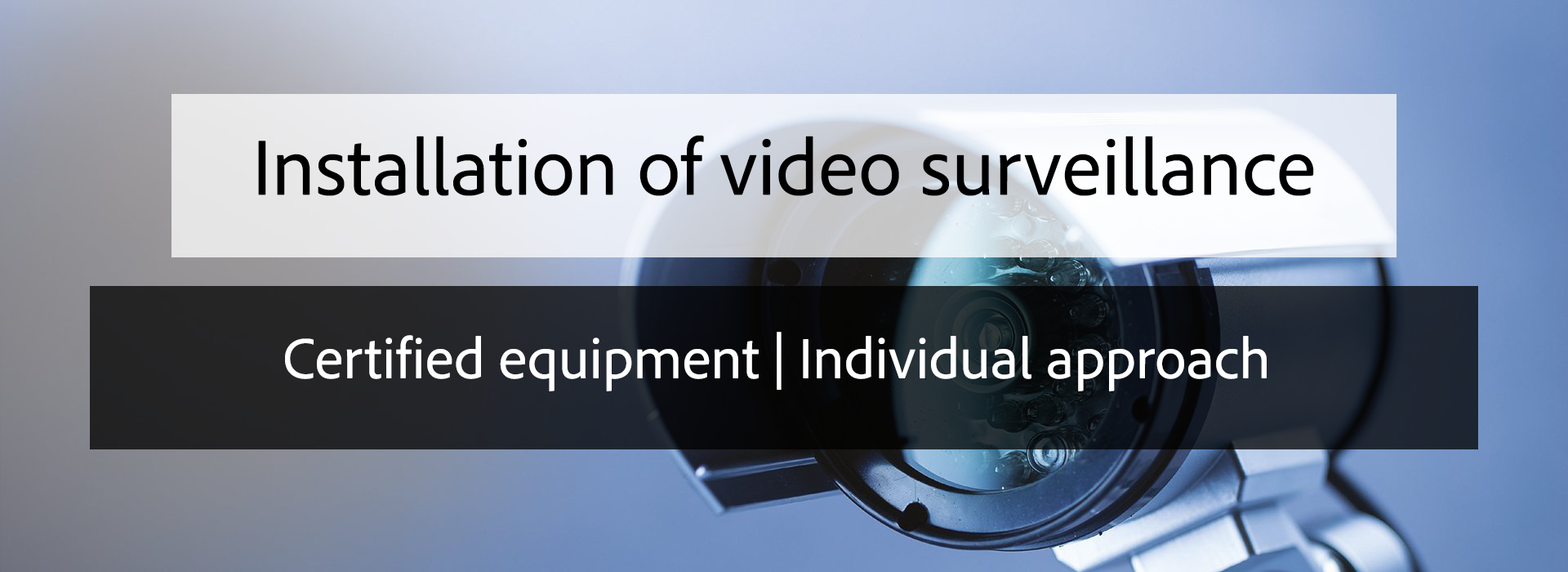
<style>
.page{position:relative;width:1568px;height:572px}
.page>*{position:absolute;margin:0}
.t1{font:81.7px "AdobeClean-Regular";color:#000000}
.t2{font:58.8px "AdobeClean-Regular";color:#ffffff}
</style>
<div class="page">
<p class="t1" style="left:258px;top:135px;width:1056px;height:61px">Installation of video surveillance</p>
<p class="t2" style="left:285px;top:332px;width:982px;height:59px">Certified equipment | Individual approach</p>
</div>
